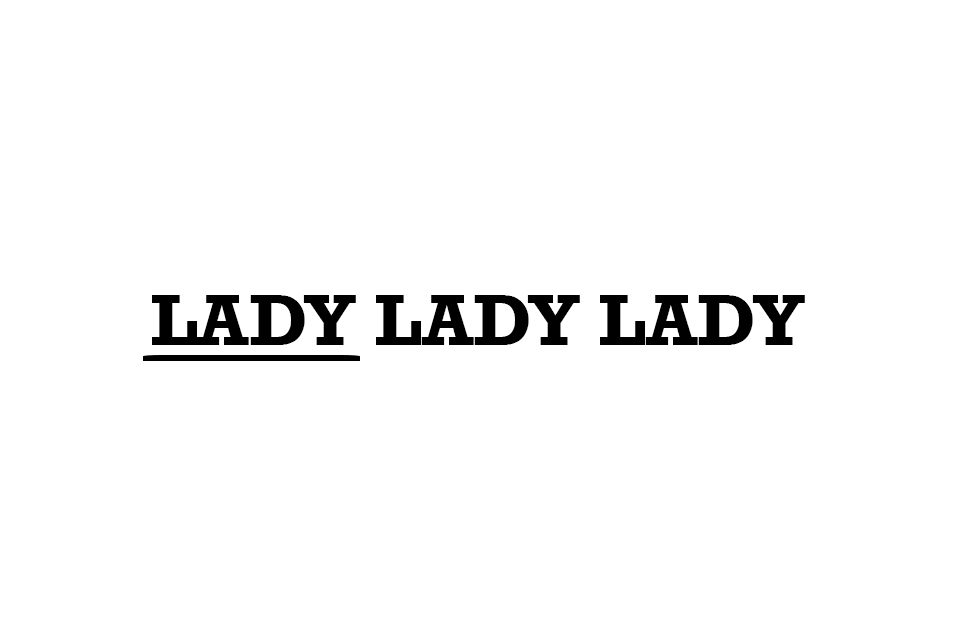
<style>
.page{position:relative;width:960px;height:640px;background:#ffffff}
.page>*{position:absolute;margin:0}
.t1{font:73.7px "Rockwell-Bold";color:#000000}
</style>
<div class="page">
<p class="t1" style="left:152px;top:295px;width:653px;height:50px">LADY LADY LADY</p>
</div>
